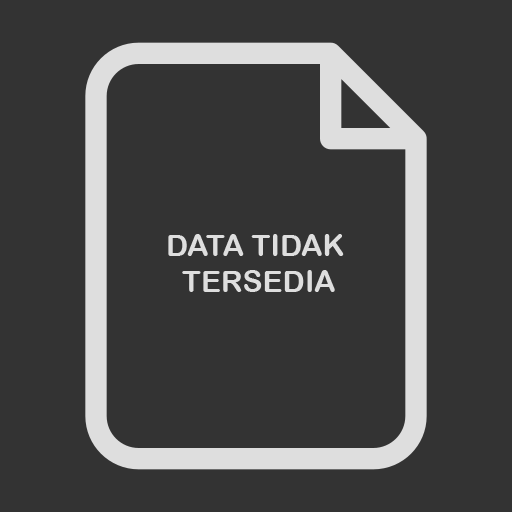
<style>
.page{position:relative;width:512px;height:512px;background:#333333}
.page>*{position:absolute;margin:0}
.t1{font:30px "ArialRoundedMTBold";color:#dedede}
</style>
<div class="page">
<p class="t1" style="left:168px;top:234px;width:176px;height:58px;text-align:center">DATA TIDAK <br>TERSEDIA</p>
</div>
